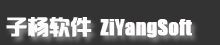
<style>
.page{position:relative;width:220px;height:45px;background:#333333}
.page>*{position:absolute;margin:0}
.t1{font:21px "hzgb";color:#fcfbfb;font-weight:bold}
.t2{font:20px "Impact";color:#fefcfc;font-weight:bold}
</style>
<div class="page">
<p class="t1" style="left:6px;top:17px;width:86px;height:20px">子杨软件</p>
<p class="t2" style="left:100px;top:19px;width:92px;height:19px">ZiYangSoft</p>
</div>
